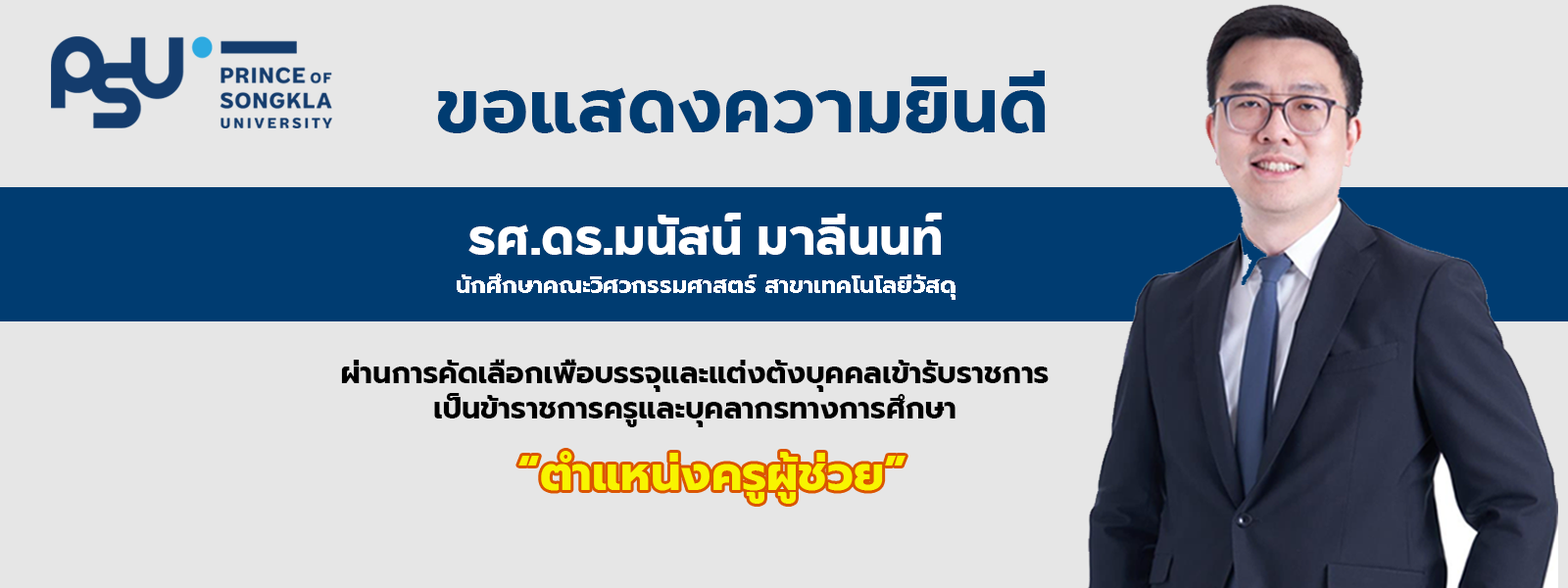
<style>
.page{position:relative;width:1568px;height:588px;background:#e6e6e6}
.page>*{position:absolute;margin:0}
.t1{font:70.6px "PSUStidti-Bold";color:#003c71}
.t2{font:47px "PSUStidti-Bold";color:#ffffff}
.t3{font:23.5px "Prompt-Bold";color:#ffffff}
.t4{font:29.4px "Prompt-Bold";color:#000000}
</style>
<div class="page">
<p class="t1" style="left:437px;top:71px;width:609px;height:62px">ขอแสดงความยินดี</p>
<p class="t2" style="left:468px;top:213px;width:474px;height:42px">รศ.ดร.มนัสน์ มาลีนนท์</p>
<p class="t3" style="left:457px;top:273px;width:499px;height:27px">นักศึกษาคณะวิศวกรรมศาสตร์ สาขาเทคโนโลยีวัสดุ</p>
<p class="t4" style="left:341px;top:359px;width:708px;height:68px;text-align:center">ผ่านการคัดเลือกเพื้อบรรจุและแต่งตั้งบุคคลเข้ารับราชการ<br>เป็นข้าราชการครูและบุคลากรทางการศึกษา</p>
</div>
